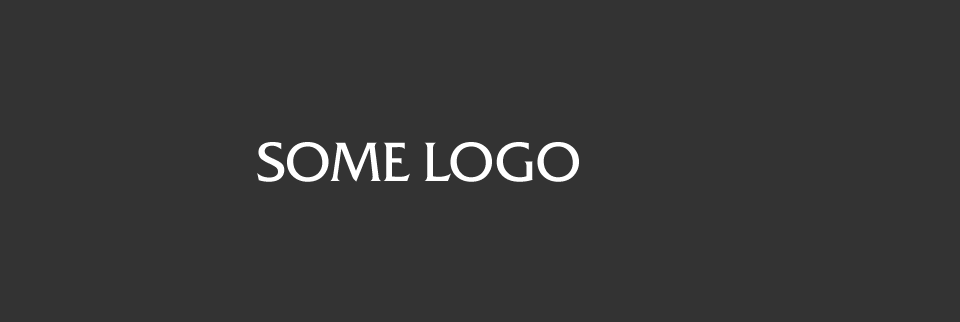
<style>
.page{position:relative;width:960px;height:322px;background:#333333}
.page>*{position:absolute;margin:0}
.t1{font:54.8px "BlizQuadrataWeb";color:#ffffff}
</style>
<div class="page">
<p class="t1" style="left:257px;top:142px;width:322px;height:40px">SOME LOGO</p>
</div>
